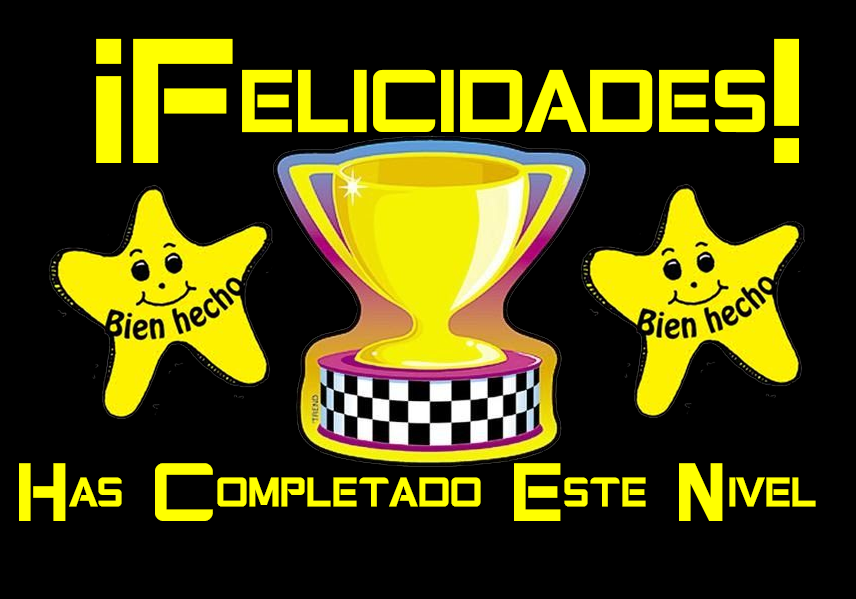
<style>
.page{position:relative;width:856px;height:599px;background:#000000}
.page>*{position:absolute;margin:0}
.t1{font:127.3px "GearsofPeace";color:#ffff00}
.t2{font:59.2px "GearsofPeace";color:#ffff00}
</style>
<div class="page">
<p class="t1" style="left:96px;top:38px;width:703px;height:125px">¡Felicidades!</p>
<p class="t2" style="left:19px;top:463px;width:797px;height:58px">Has Completado Este Nivel</p>
</div>
